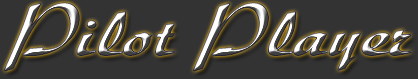
<style>
.page{position:relative;width:418px;height:79px;background:#333333}
.page>*{position:absolute;margin:0}
.t1{font:72px "DiskusLTStd-Bold";scale:1.2 1}
</style>
<div class="page">
<p class="t1" style="left:4px;top:3px;width:408px;height:68px">Pilot Player</p>
</div>
